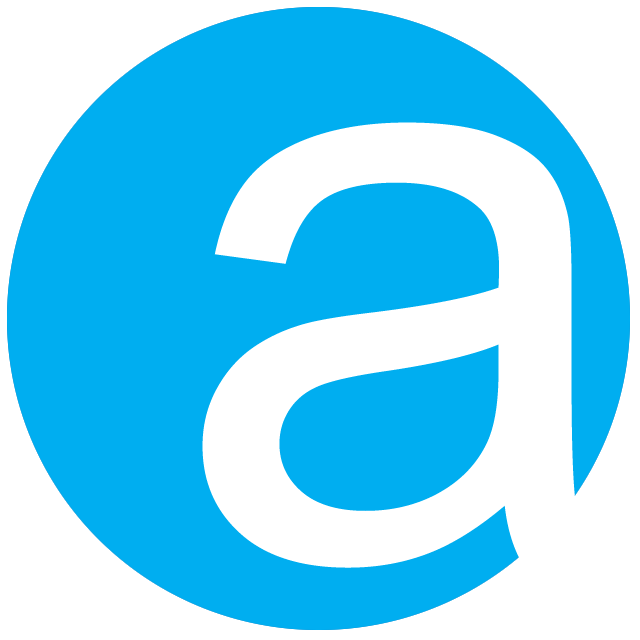
<style>
.page{position:relative;width:640px;height:640px;background:#00aef0}
.page>*{position:absolute;margin:0}
.t1{font:1145.8px "Utsaah";color:#ffffff}
</style>
<div class="page">
<p class="t1" style="left:202px;top:122px;width:393px;height:446px">a</p>
</div>
